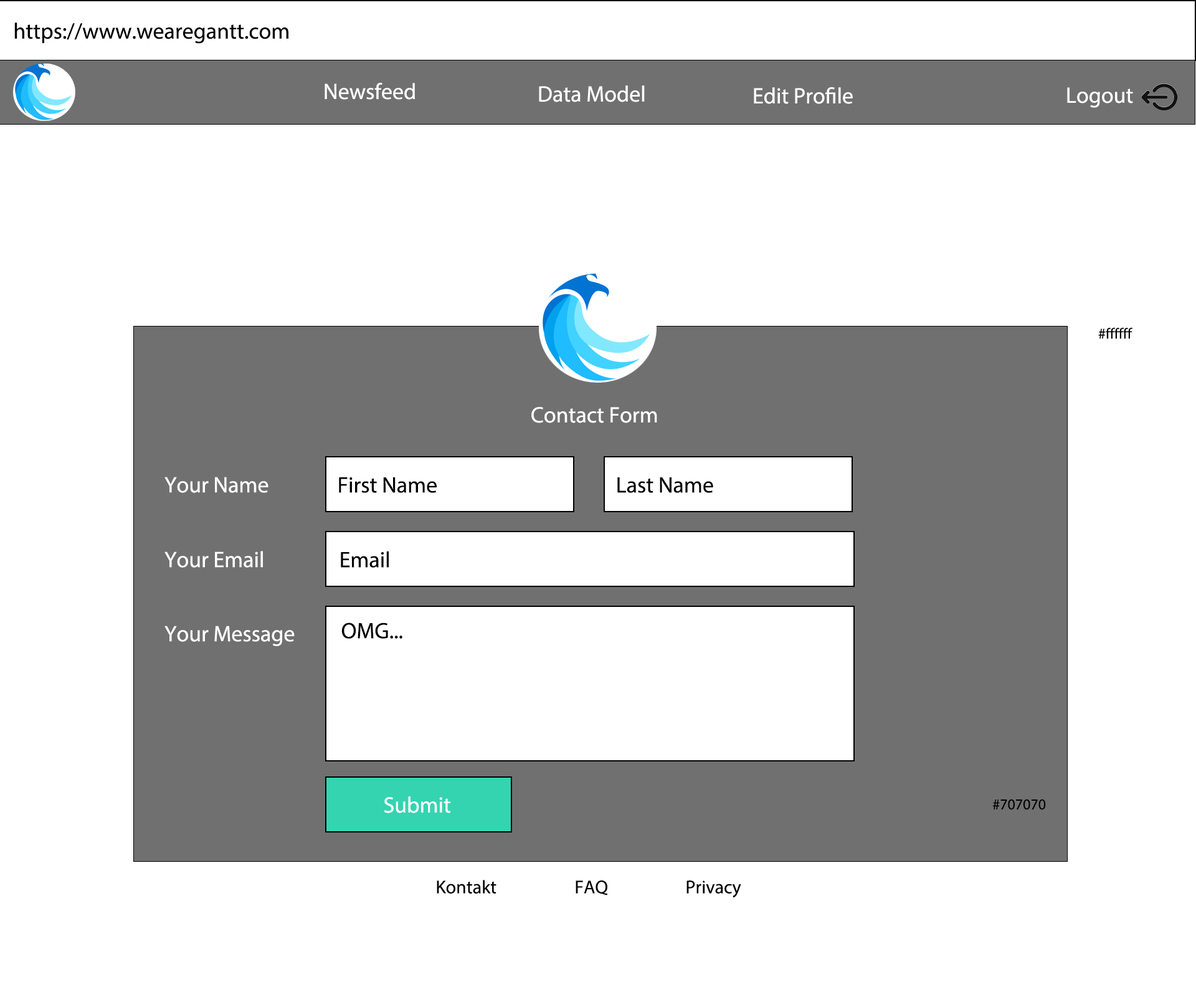
<style>
.page{position:relative;width:1196px;height:997px;background:#ffffff}
.page>*{position:absolute;margin:0}
.t1{font:22.4px "MyriadPro-Regular";color:#000000}
.t2{font:22.4px "MyriadPro-Regular";color:#ffffff}
.t3{font:15px "MyriadPro-Regular";color:#000000}
.t4{font:18.7px "MyriadPro-Regular";color:#000000}
</style>
<div class="page">
<p class="t1" style="left:14px;top:22px;width:274px;height:22px">https://www.wearegantt.com</p>
<p class="t2" style="left:325px;top:82px;width:90px;height:18px">Newsfeed</p>
<p class="t2" style="left:539px;top:85px;width:106px;height:17px">Data Model</p>
<p class="t2" style="left:754px;top:87px;width:99px;height:17px">Edit Profile</p>
<p class="t2" style="left:1067px;top:87px;width:66px;height:21px">Logout</p>
<p class="t3" style="left:1098px;top:327px;width:35px;height:12px">#ffffff</p>
<p class="t2" style="left:531px;top:407px;width:126px;height:16px">Contact Form</p>
<p class="t2" style="left:164px;top:477px;width:105px;height:16px">Your Name</p>
<p class="t1" style="left:339px;top:477px;width:98px;height:16px">First Name</p>
<p class="t1" style="left:617px;top:477px;width:96px;height:16px">Last Name</p>
<p class="t2" style="left:164px;top:551px;width:99px;height:17px">Your Email</p>
<p class="t1" style="left:341px;top:551px;width:48px;height:17px">Email</p>
<p class="t2" style="left:164px;top:626px;width:131px;height:20px">Your Message</p>
<p class="t1" style="left:341px;top:622px;width:61px;height:17px">OMG...</p>
<p class="t2" style="left:384px;top:796px;width:66px;height:17px">Submit</p>
<p class="t3" style="left:993px;top:799px;width:53px;height:11px">#707070</p>
<p class="t4" style="left:437px;top:880px;width:60px;height:13px">Kontakt</p>
<p class="t4" style="left:576px;top:880px;width:32px;height:15px">FAQ</p>
<p class="t4" style="left:687px;top:880px;width:54px;height:18px">Privacy</p>
</div>
